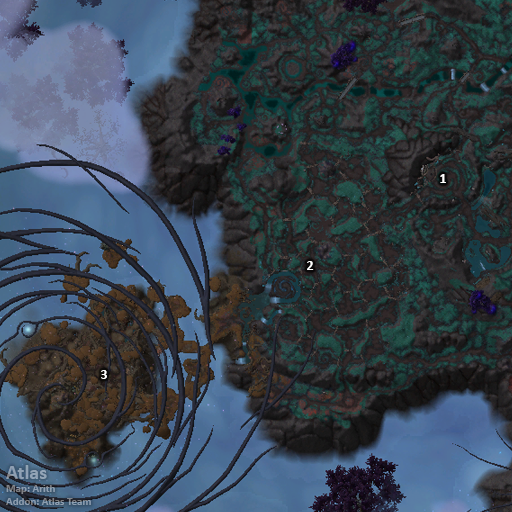
<style>
.page{position:relative;width:512px;height:512px}
.page>*{position:absolute;margin:0}
.t1{font:14px "Calibri-Bold";color:#ffffff}
.t2{font:11px "Calibri-Bold";color:#8e9fb2}
.t3{font:20px "Calibri-Bold";color:#8e9fb2}
</style>
<div class="page">
<p class="t1" style="left:440px;top:174px;width:6px;height:9px">1</p>
<p class="t1" style="left:307px;top:261px;width:7px;height:9px">2</p>
<p class="t1" style="left:101px;top:370px;width:6px;height:9px">3</p>
<p class="t2" style="left:6px;top:465px;width:85px;height:40px"><span class="t3">Atlas<br></span>Map: Arith<br>Addon: Atlas Team</p>
</div>
